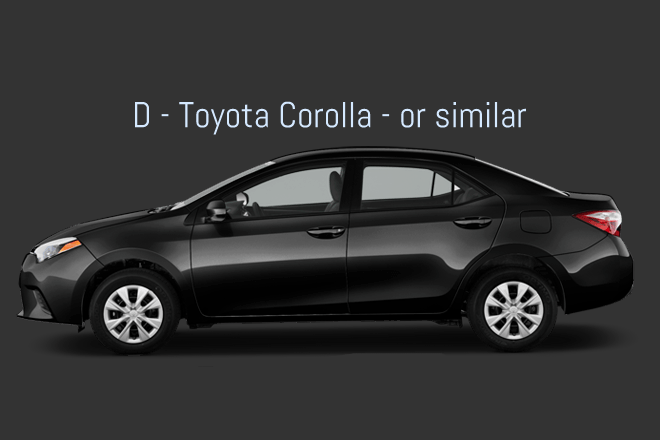
<style>
.page{position:relative;width:660px;height:440px;background:#333333}
.page>*{position:absolute;margin:0}
.t1{font:36px "Abel-Regular";color:#d5e9ff}
</style>
<div class="page">
<p class="t1" style="left:134px;top:101px;width:392px;height:34px">D - Toyota Corolla - or similar</p>
</div>
